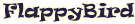
<style>
.page{position:relative;width:135px;height:24px;background:#261d4a}
.page>*{position:absolute;margin:0}
.t1{font:18px "Ravie";color:#261d4a}
</style>
<div class="page">
<p class="t1" style="left:3px;top:2px;width:131px;height:20px">FlappyBird</p>
</div>
